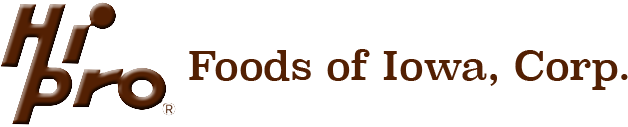
<style>
.page{position:relative;width:628px;height:127px;background:#ffffff}
.page>*{position:absolute;margin:0}
.t1{font:39px "Superclarendon-Regular";color:#532003}
</style>
<div class="page">
<p class="t1" style="left:189px;top:49px;width:439px;height:41px">Foods of Iowa, Corp.</p>
</div>
